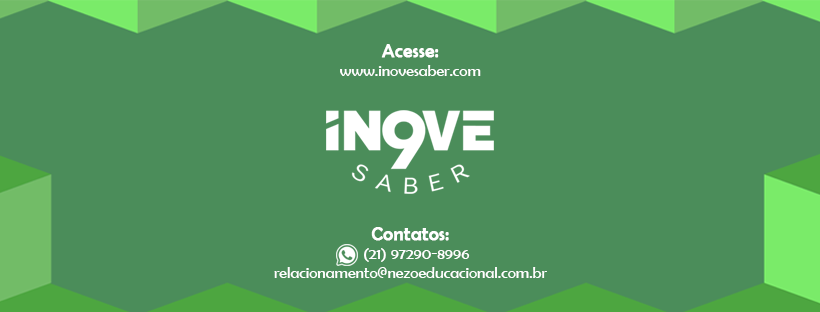
<style>
.page{position:relative;width:820px;height:312px;background:#4b8d5a}
.page>*{position:absolute;margin:0}
.t1{font:16px "BerlinSansFB-Reg";color:#ffffff}
.t2{font:18.9px "BerlinSansFB-Reg";color:#ffffff;font-weight:bold}
</style>
<div class="page">
<p class="t1" style="left:340px;top:44px;width:141px;height:32px;text-align:center"><span class="t2">Acesse:<br></span>www.inovesaber.com</p>
<p class="t1" style="left:274px;top:227px;width:273px;height:51px;text-align:center"><span class="t2">Contatos:<br></span>   (21) 97290-8996 <br>relacionamento@nezoeducacional.com.br</p>
</div>
